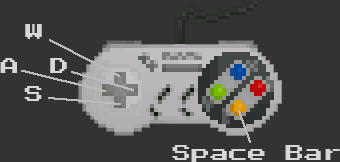
<style>
.page{position:relative;width:340px;height:162px;background:#333333}
.page>*{position:absolute;margin:0}
.t1{font:16.8px "PressStart2P-Regular";color:#d7d7d7;scale:1.12 1}
</style>
<div class="page">
<p class="t1" style="left:25px;top:24px;width:17px;height:15px">W</p>
<p class="t1" style="left:0px;top:58px;width:17px;height:15px">A</p>
<p class="t1" style="left:50px;top:58px;width:17px;height:15px">D</p>
<p class="t1" style="left:24px;top:86px;width:18px;height:15px">S</p>
<p class="t1" style="left:172px;top:145px;width:168px;height:17px">Space Bar</p>
</div>
